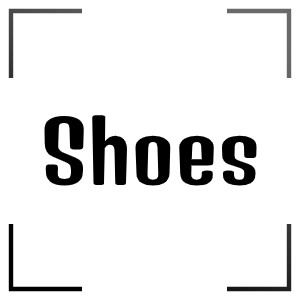
<style>
.page{position:relative;width:300px;height:300px;background:#ffffff}
.page>*{position:absolute;margin:0}
.t1{font:83px "DenkOne-Regular";color:#000000}
</style>
<div class="page">
<p class="t1" style="left:44px;top:115px;width:213px;height:71px">Shoes</p>
</div>
